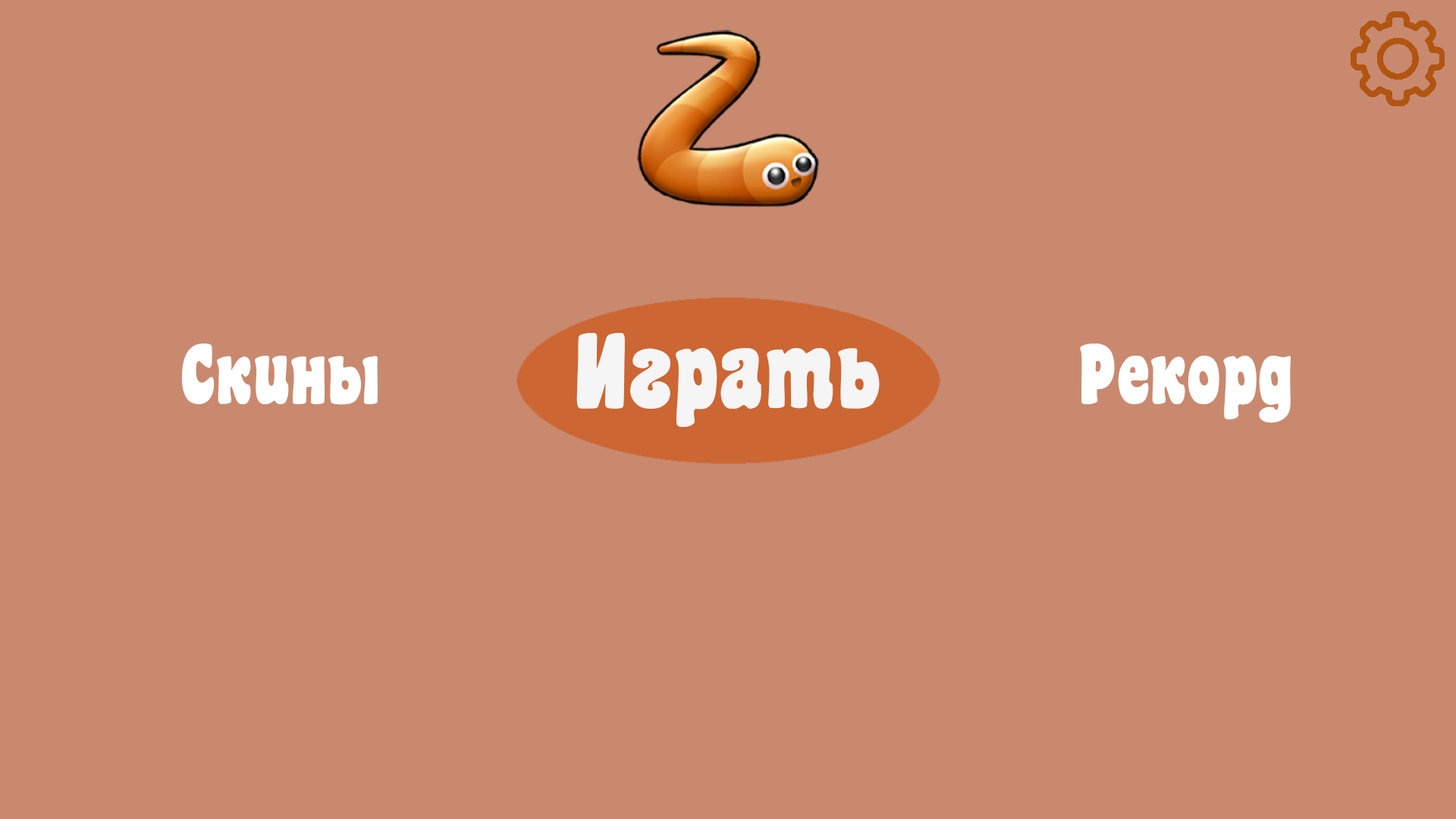
<style>
.page{position:relative;width:1456px;height:819px;background:#c9896f}
.page>*{position:absolute;margin:0}
.t1{font:94.8px "mr_CoasterG-Black";letter-spacing:0.005em;color:#f5f5f5}
.t2{font:75.8px "mr_CoasterG-Black";letter-spacing:0.005em;color:#ffffff}
</style>
<div class="page">
<p class="t1" style="left:576px;top:333px;width:304px;height:94px">Играть</p>
<p class="t2" style="left:181px;top:344px;width:197px;height:61px">Скины</p>
<p class="t2" style="left:1080px;top:344px;width:211px;height:79px">Рекорд</p>
</div>
